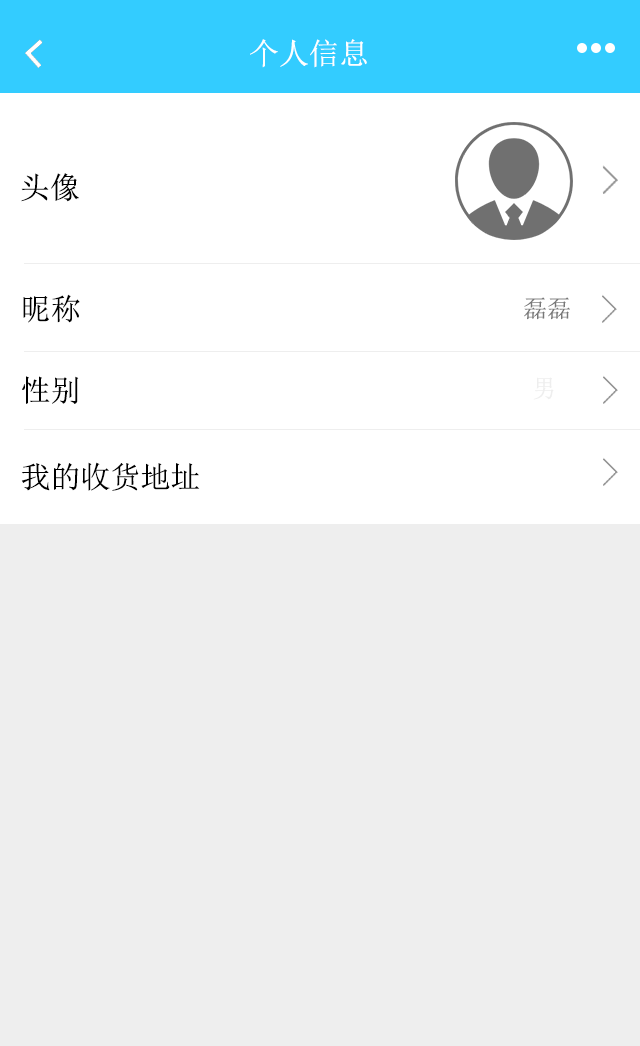
<style>
.page{position:relative;width:640px;height:1046px;background:#eeeeee}
.page>*{position:absolute;margin:0}
.t1{font:30px "SimSun";color:#ffffff}
.t2{font:30px "SimSun";color:#000000}
.t3{font:24px "SimSun";color:#787878}
.t4{font:24px "SimSun";color:#eeeeee}
</style>
<div class="page">
<p class="t1" style="left:250px;top:39px;width:117px;height:29px">个人信息</p>
<p class="t2" style="left:21px;top:173px;width:58px;height:29px">头像</p>
<p class="t2" style="left:23px;top:294px;width:57px;height:29px">昵称</p>
<p class="t3" style="left:524px;top:297px;width:46px;height:23px">磊磊</p>
<p class="t2" style="left:22px;top:376px;width:57px;height:28px">性别</p>
<p class="t4" style="left:533px;top:377px;width:21px;height:23px">男</p>
<p class="t2" style="left:21px;top:462px;width:179px;height:29px">我的收货地址</p>
</div>
